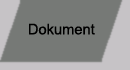
<style>
.page{position:relative;width:130px;height:70px;background:#767976}
.page>*{position:absolute;margin:0}
.t1{font:14.7px "ArialMT";color:#000000}
</style>
<div class="page">
<p class="t1" style="left:29px;top:23px;width:66px;height:12px">Dokument</p>
</div>
